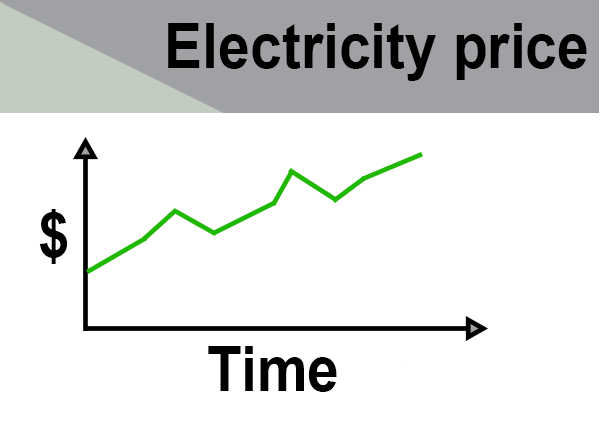
<style>
.page{position:relative;width:600px;height:421px;background:#ffffff}
.page>*{position:absolute;margin:0}
.t1{font:61.9px "Arial-BoldMT";color:#000000;scale:0.92 1}
</style>
<div class="page">
<p class="t1" style="left:168px;top:23px;width:419px;height:58px">Electricity price</p>
<p class="t1" style="left:39px;top:209px;width:29px;height:55px">$</p>
<p class="t1" style="left:208px;top:346px;width:129px;height:46px">Time</p>
</div>
